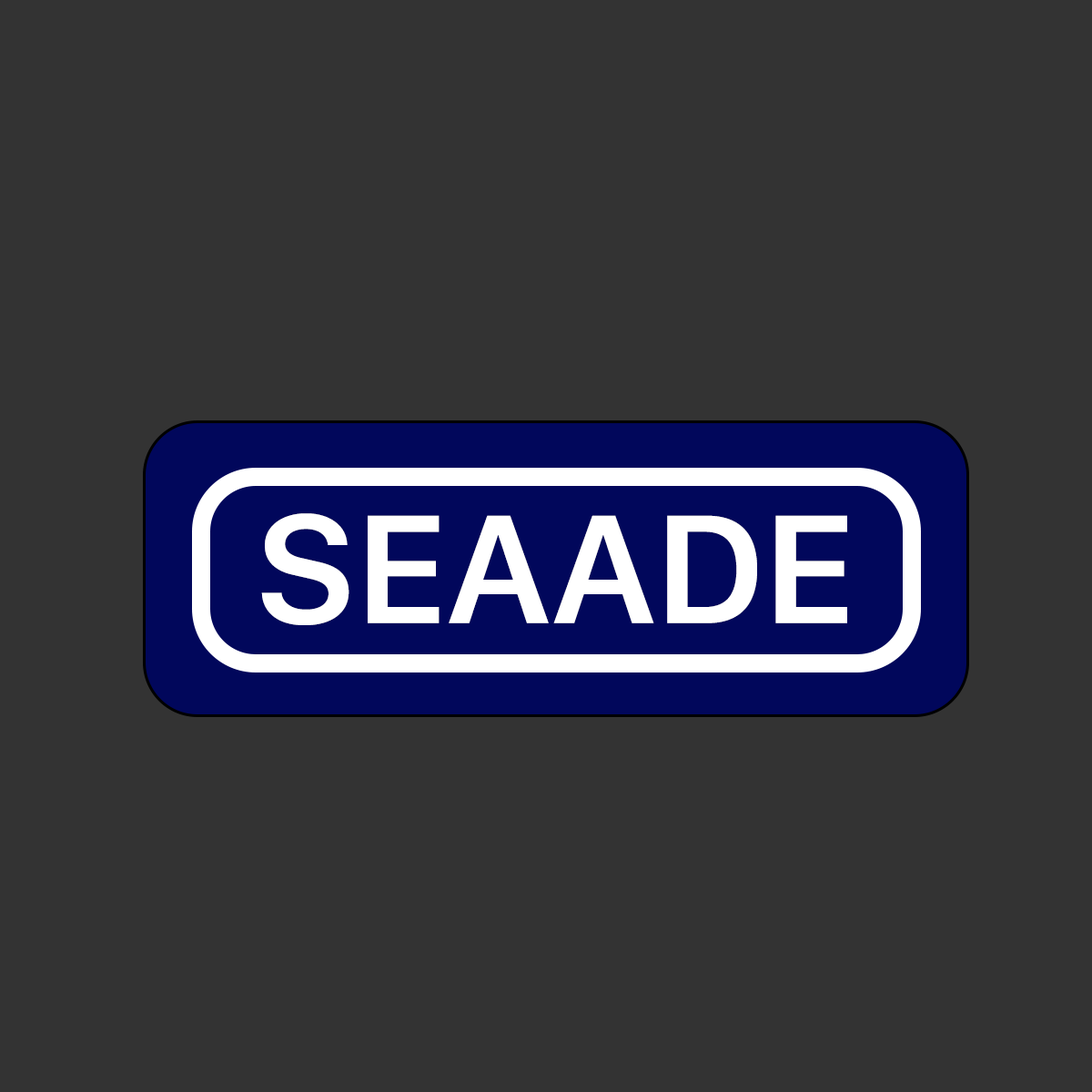
<style>
.page{position:relative;width:1092px;height:1092px;background:#333333}
.page>*{position:absolute;margin:0}
.t1{font:160.9px "SanFranciscoDisplay-Semibold";color:#ffffff;scale:1.05 1}
</style>
<div class="page">
<p class="t1" style="left:261px;top:513px;width:586px;height:112px">SEAADE</p>
</div>
